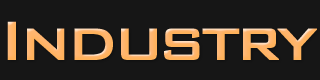
<style>
.page{position:relative;width:320px;height:80px;background:#161616}
.page>*{position:absolute;margin:0}
.t1{font:72px "BankGothicBT-Light";letter-spacing:-0.075em;color:#ffb469;font-weight:bold}
</style>
<div class="page">
<p class="t1" style="left:7px;top:21px;width:310px;height:39px">Industry</p>
</div>
